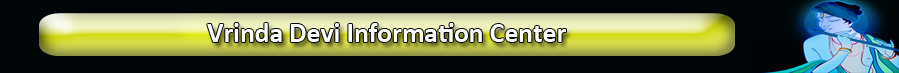
<style>
.page{position:relative;width:899px;height:73px;background:#000508}
.page>*{position:absolute;margin:0}
.t1{font:27.5px "Calibri-Bold";color:#feffff}
</style>
<div class="page">
<p class="t1" style="left:207px;top:23px;width:359px;height:19px">Vrinda Devi Information Center</p>
</div>
